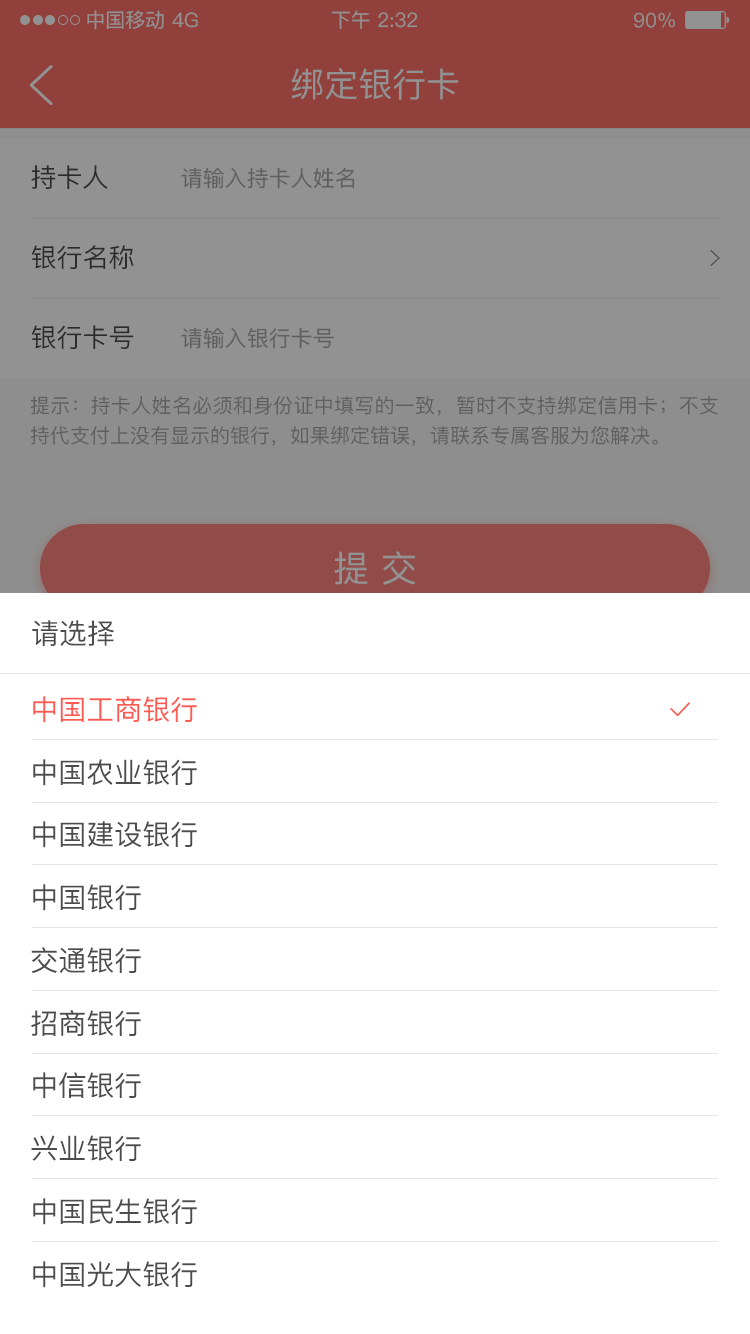
<style>
.page{position:relative;width:750px;height:1334px;background:#ffffff}
.page>*{position:absolute;margin:0}
.t1{font:20px "PingFang-SC-Medium";color:#929292}
.t2{font:34px "PingFang-SC-Medium";color:#929292}
.t3{font:26px "PingFang-SC-Medium";color:#333333}
.t4{font:22px "PingFang-SC-Medium";color:#5f5f5f}
.t5{font:20px/30px "PingFang-SC-Medium";color:#5f5f5f}
.t6{font:36px "PingFang-SC-Medium";color:#929292}
.t7{font:28px "PingFang-SC-Medium";color:#4c4c4c}
.t8{font:28px "PingFang-SC-Medium";color:#fe5a51}
</style>
<div class="page">
<p class="t1" style="left:87px;top:10px;width:77px;height:20px">中国移动</p>
<p class="t1" style="left:172px;top:12px;width:26px;height:16px">4G</p>
<p class="t1" style="left:331px;top:10px;width:87px;height:20px">下午 2:32</p>
<p class="t1" style="left:634px;top:12px;width:41px;height:16px">90%</p>
<p class="t2" style="left:291px;top:68px;width:168px;height:32px">绑定银行卡</p>
<p class="t3" style="left:31px;top:165px;width:77px;height:24px">持卡人</p>
<p class="t4" style="left:181px;top:167px;width:174px;height:22px">请输入持卡人姓名</p>
<p class="t3" style="left:31px;top:245px;width:103px;height:24px">银行名称</p>
<p class="t3" style="left:31px;top:325px;width:103px;height:24px">银行卡号</p>
<p class="t4" style="left:181px;top:327px;width:153px;height:22px">请输入银行卡号</p>
<p class="t5" style="left:30px;top:396px;width:688px;height:50px;text-align:justify">提示：持卡人姓名必须和身份证中填写的一致，暂时不支持绑定信用卡；不支持代支付上没有显示的银行，如果绑定错误，请联系专属客服为您解决。</p>
<p class="t6" style="left:334px;top:551px;width:82px;height:34px">提 交</p>
<p class="t7" style="left:32px;top:620px;width:82px;height:26px">请选择</p>
<p class="t8" style="left:33px;top:696px;width:164px;height:27px">中国工商银行</p>
<p class="t7" style="left:33px;top:759px;width:164px;height:27px">中国农业银行</p>
<p class="t7" style="left:33px;top:821px;width:164px;height:27px">中国建设银行</p>
<p class="t7" style="left:33px;top:884px;width:108px;height:27px">中国银行</p>
<p class="t7" style="left:31px;top:947px;width:110px;height:26px">交通银行</p>
<p class="t7" style="left:31px;top:1010px;width:110px;height:26px">招商银行</p>
<p class="t7" style="left:33px;top:1072px;width:108px;height:27px">中信银行</p>
<p class="t7" style="left:31px;top:1135px;width:110px;height:26px">兴业银行</p>
<p class="t7" style="left:33px;top:1198px;width:164px;height:27px">中国民生银行</p>
<p class="t7" style="left:33px;top:1261px;width:164px;height:27px">中国光大银行</p>
</div>
